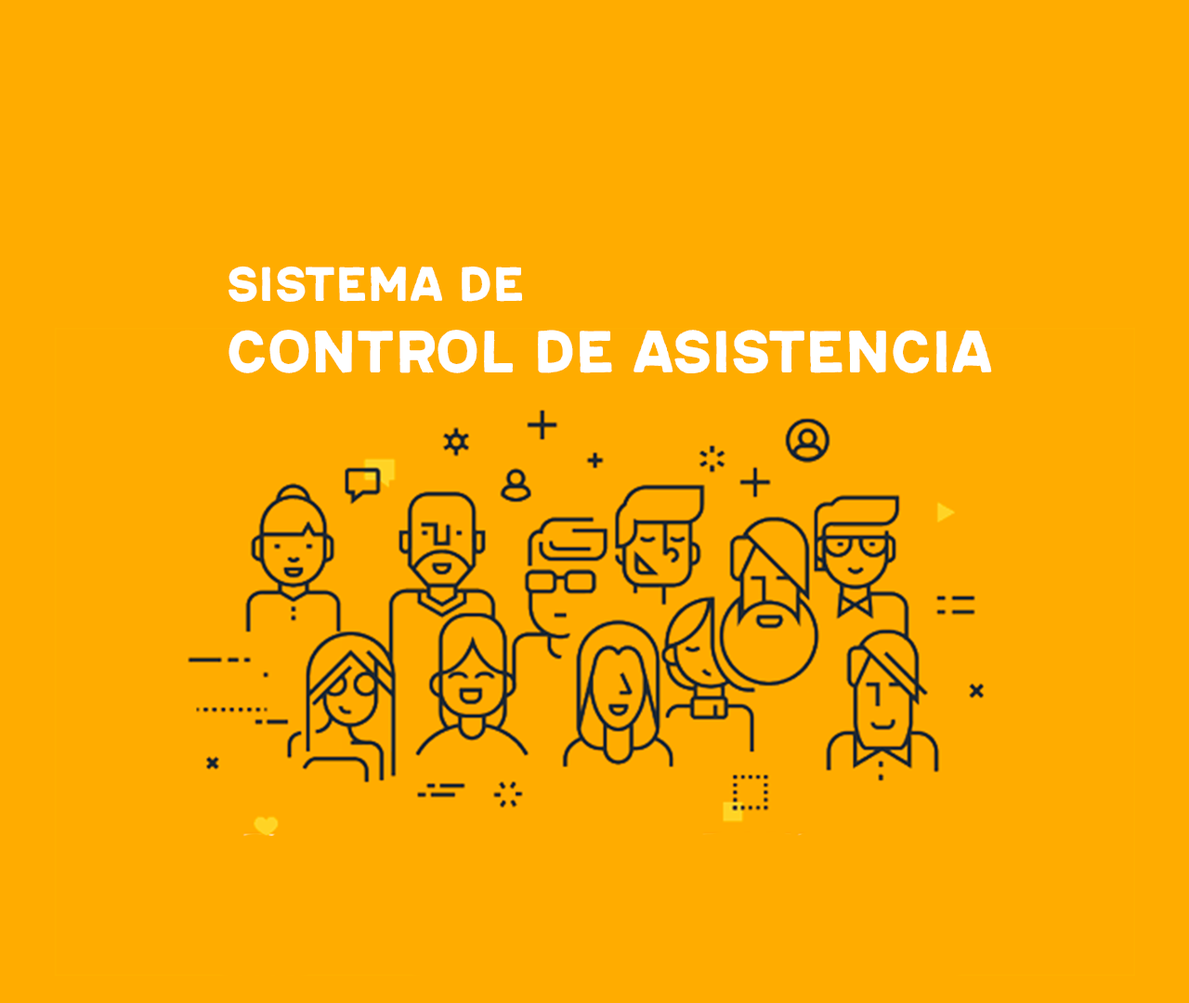
<style>
.page{position:relative;width:1189px;height:1003px;background:#ffac00}
.page>*{position:absolute;margin:0}
.t1{font:59.4px "Armavir01-Bold";color:#ffffff}
.t2{font:59.4px "Armavir01-Bold";color:#4614c6}
.t3{font:48.3px "Armavir01-Bold";color:#ffffff}
</style>
<div class="page">
<p class="t1" style="left:228px;top:266px;width:764px;height:107px;text-align:center"><span class="t2"><br><br><br></span><span class="t3">sistema de</span> <br>control de asistencia</p>
</div>
